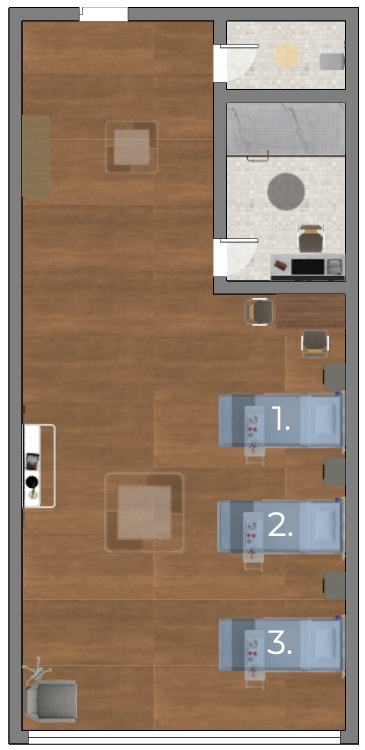
<style>
.page{position:relative;width:365px;height:750px}
.page>*{position:absolute;margin:0}
.t1{font:33.3px "MontserratRoman-Regular";color:#ffffff}
</style>
<div class="page">
<p class="t1" style="left:272px;top:406px;width:18px;height:25px">1.</p>
<p class="t1" style="left:268px;top:512px;width:25px;height:25px">2.</p>
<p class="t1" style="left:267px;top:630px;width:25px;height:25px">3.</p>
</div>
